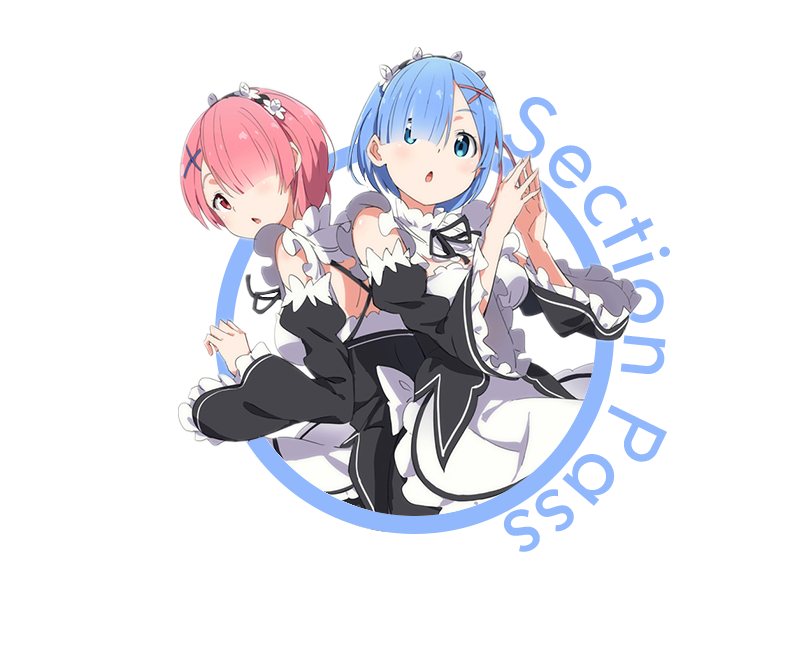
<style>
.page{position:relative;width:800px;height:650px;background:#ffffff}
.page>*{position:absolute;margin:0}
.t1{font:82.8px "HKExplorerSharp-Regular";color:#91b8fc}
</style>
<div class="page">
<p class="t1" style="left:503px;top:97px;width:167px;height:455px;rotate:-16deg">Section Pass</p>
</div>
